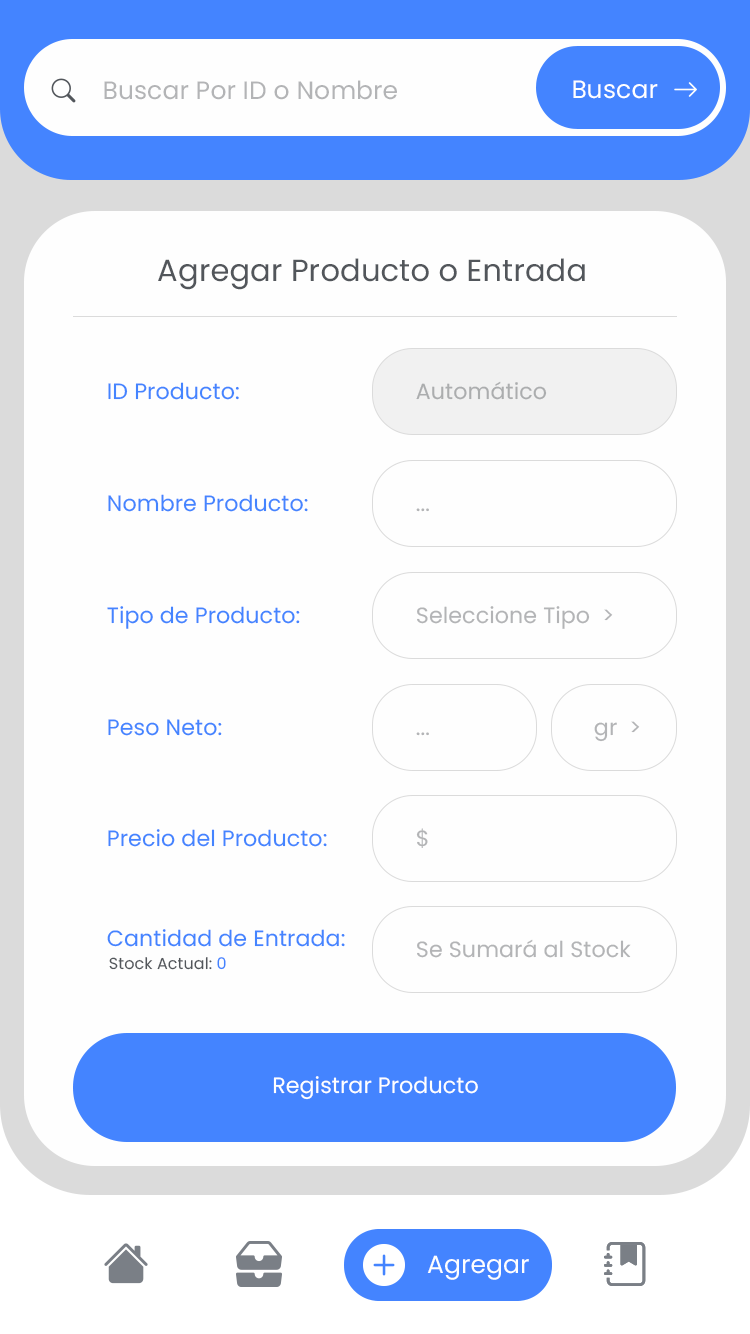
<style>
.page{position:relative;width:750px;height:1334px;background:#fefefe}
.page>*{position:absolute;margin:0}
.t1{font:25px "Poppins-Regular";letter-spacing:0.005em;color:#b3b4b6}
.t2{font:25px "Poppins-Regular";letter-spacing:0.005em;color:#ffffff}
.t3{font:30.6px "Poppins-Regular";letter-spacing:0.005em;color:#52565b}
.t4{font:22.1px "Poppins-Regular";letter-spacing:0.005em;color:#4484ff}
.t5{font:22.1px "Poppins-Regular";letter-spacing:0.005em;color:#abadae}
.t6{font:22.1px "Poppins-Regular";letter-spacing:0.005em;color:#b3b4b6}
.t7{font:16px "Poppins-Regular";letter-spacing:0.005em;color:#52565b}
.t8{font:16px "Poppins-Regular";letter-spacing:0.005em;color:#52565b;text-transform:uppercase}
.t9{font:16px "Poppins-Regular";letter-spacing:0.005em;color:#4484ff}
.t10{font:22.1px "Poppins-Regular";letter-spacing:0.005em;color:#ffffff}
.t11{font:25px "Poppins-Regular";letter-spacing:0.005em;color:#fefefe}
</style>
<div class="page">
<p class="t1" style="left:104px;top:80px;width:293px;height:20px">Buscar Por ID o Nombre</p>
<p class="t2" style="left:573px;top:80px;width:85px;height:19px">Buscar</p>
<p class="t3" style="left:158px;top:258px;width:427px;height:32px">Agregar Producto o Entrada</p>
<p class="t4" style="left:108px;top:382px;width:131px;height:18px">ID Producto:</p>
<p class="t5" style="left:416px;top:381px;width:131px;height:19px">Automático</p>
<p class="t4" style="left:108px;top:494px;width:200px;height:18px">Nombre Producto:</p>
<p class="t6" style="left:416px;top:508px;width:13px;height:4px">...</p>
<p class="t4" style="left:107px;top:606px;width:193px;height:23px">Tipo de Producto:</p>
<p class="t6" style="left:417px;top:606px;width:196px;height:23px">Seleccione Tipo  &gt;</p>
<p class="t4" style="left:108px;top:719px;width:114px;height:17px">Peso Neto:</p>
<p class="t6" style="left:594px;top:721px;width:46px;height:21px">gr  &gt;</p>
<p class="t6" style="left:416px;top:732px;width:13px;height:4px">...</p>
<p class="t4" style="left:108px;top:829px;width:219px;height:18px">Precio del Producto:</p>
<p class="t6" style="left:416px;top:828px;width:12px;height:20px">$</p>
<p class="t4" style="left:107px;top:929px;width:238px;height:18px">Cantidad de Entrada:</p>
<p class="t6" style="left:417px;top:939px;width:214px;height:19px">Se Sumará al Stock</p>
<p class="t7" style="left:109px;top:957px;width:117px;height:13px"><span class="t8">S</span>tock Actual: <span class="t9">0</span></p>
<p class="t10" style="left:273px;top:1076px;width:205px;height:24px">Registrar Producto</p>
<p class="t11" style="left:427px;top:1255px;width:102px;height:25px">Agregar</p>
</div>
